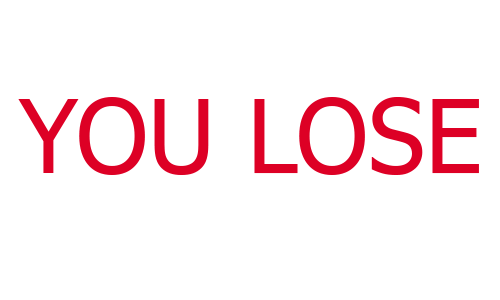
<style>
.page{position:relative;width:500px;height:300px;background:#ffffff}
.page>*{position:absolute;margin:0}
.t1{font:101.6px "Tahoma";color:#dd0025}
</style>
<div class="page">
<p class="t1" style="left:18px;top:97px;width:461px;height:78px">YOU LOSE</p>
</div>
